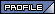
<style>
.page{position:relative;width:55px;height:14px;background:#6179ac}
.page>*{position:absolute;margin:0}
.t1{font:8px "BitDustTwo";color:#ffffff}
</style>
<div class="page">
<p class="t1" style="left:5px;top:5px;width:37px;height:5px">PROFILE</p>
</div>
